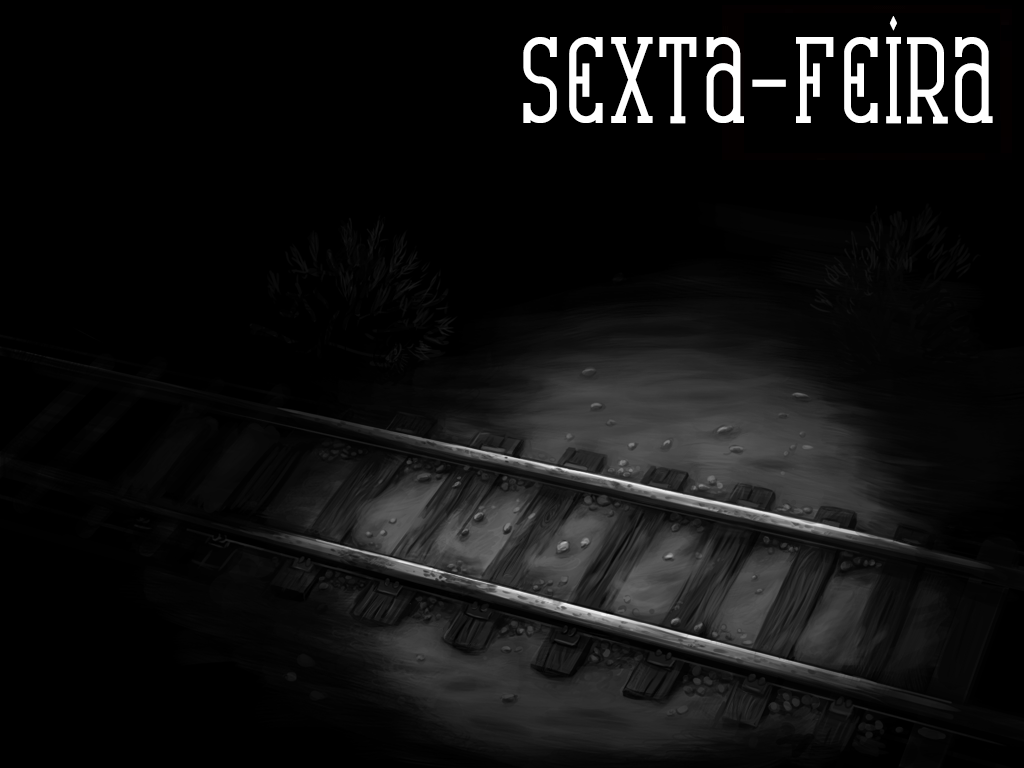
<style>
.page{position:relative;width:1024px;height:768px;background:#000000}
.page>*{position:absolute;margin:0}
.t1{font:132px "CatharsisRequiemBold";letter-spacing:-0.003em;color:#ffffff}
</style>
<div class="page">
<p class="t1" style="left:523px;top:16px;width:470px;height:108px">sexta-feira</p>
</div>
